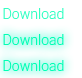
<style>
.page{position:relative;width:82px;height:78px;background:#ffffff}
.page>*{position:absolute;margin:0}
.t1{font:14px "Roboto-Light";color:#33ffc3}
.t2{font:14px "Roboto-Light";color:#00ffb4}
</style>
<div class="page">
<p class="t1" style="left:3px;top:8px;width:61px;height:11px">Download</p>
<p class="t2" style="left:3px;top:34px;width:61px;height:11px">Download</p>
<p class="t2" style="left:3px;top:60px;width:61px;height:11px">Download</p>
</div>
